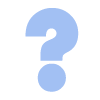
<style>
.page{position:relative;width:100px;height:100px;background:#ffffff}
.page>*{position:absolute;margin:0}
.t1{font:120px "Bauhaus93";letter-spacing:-0.005em;color:#a2c0f3}
</style>
<div class="page">
<p class="t1" style="left:25px;top:8px;width:54px;height:84px">?</p>
</div>
